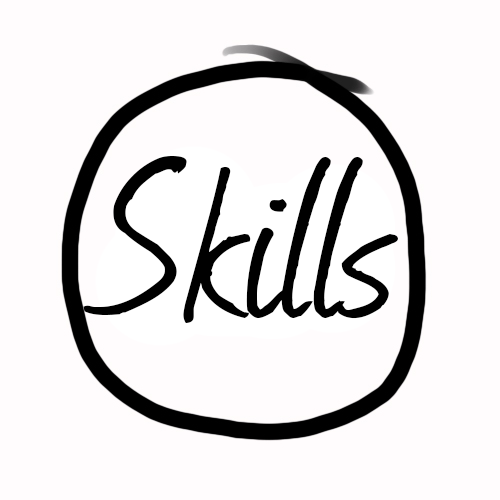
<style>
.page{position:relative;width:500px;height:500px;background:#fffcfd}
.page>*{position:absolute;margin:0}
.t1{font:262.4px "Journal";color:#000000}
</style>
<div class="page">
<p class="t1" style="left:83px;top:156px;width:315px;height:167px">Skills</p>
</div>
